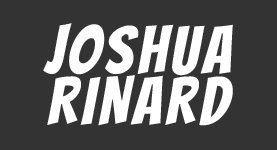
<style>
.page{position:relative;width:277px;height:150px;background:#333333}
.page>*{position:absolute;margin:0}
.t1{font:66.5px/51.3px "Bangers-Regular";letter-spacing:0.06em;color:#ffffff}
</style>
<div class="page">
<p class="t1" style="left:43px;top:23px;width:190px;height:103px;text-align:center">JOSHUA<br>RINARD</p>
</div>
